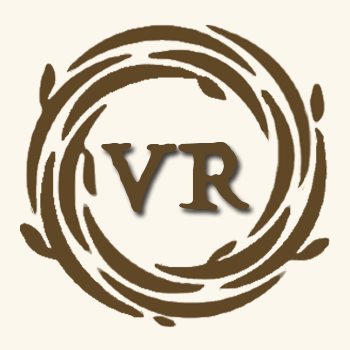
<style>
.page{position:relative;width:350px;height:350px;background:#fcf7ed}
.page>*{position:absolute;margin:0}
.t1{font:27.2px "Trattatello";color:#5f4827}
</style>
<div class="page">
<p class="t1" style="left:101px;top:142px;width:149px;height:71px">VR</p>
</div>
